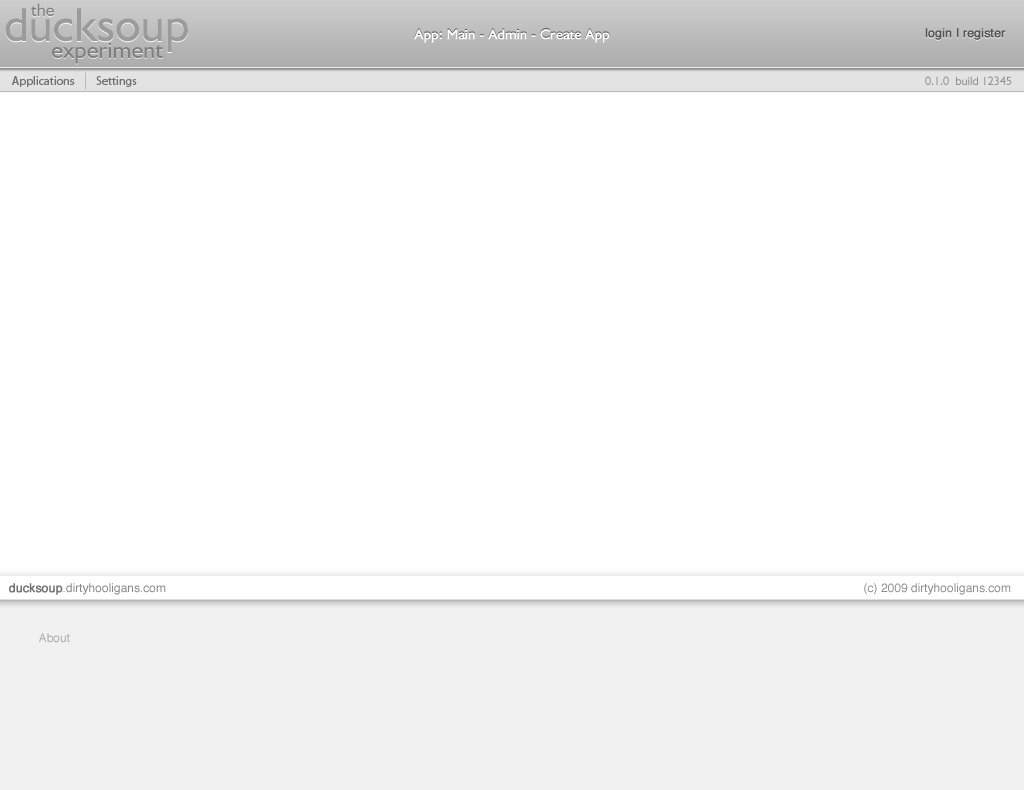
<style>
.page{position:relative;width:1024px;height:790px;background:#ffffff}
.page>*{position:absolute;margin:0}
.t1{font:18px "Humanist521BT-Roman";color:#808080}
.t2{font:48px "Humanist521BT-Roman";color:#9b9b9b}
.t3{font:48px "Humanist521BT-Roman";color:#9a9a9a}
.t4{font:14px "Humanist521BT-Roman";color:#ffffff;font-weight:bold}
.t5{font:12px "Helvetica";font-weight:bold}
.t6{font:12px "Helvetica";color:#535353;font-weight:bold}
.t7{font:24px "Humanist521BT-Roman"}
.t8{font:24px "Humanist521BT-Roman";color:#7f7f7f}
.t9{font:12px "MyriadPro-Regular";color:#717171}
.t10{font:12px "Humanist521BT-Roman";color:#919191}
.t11{font:12px "Helvetica";color:#898989}
.t12{font:12px "Helvetica";color:#727272;font-weight:bold}
.t13{font:12px "Helvetica";color:#8e8e8e}
.t14{font:12px "Helvetica";color:#aaaaaa}
</style>
<div class="page">
<p class="t1" style="left:30px;top:3px;width:24px;height:13px">the</p>
<p class="t2" style="left:5px;top:9px;width:183px;height:44px">ducksoup</p>
<p class="t3" style="left:5px;top:8px;width:183px;height:44px">ducksoup</p>
<p class="t4" style="left:414px;top:29px;width:196px;height:14px">App: Main - Admin - Create App</p>
<p class="t5" style="left:925px;top:29px;width:81px;height:12px">login | register</p>
<p class="t6" style="left:925px;top:28px;width:81px;height:12px">login | register</p>
<p class="t7" style="left:52px;top:43px;width:111px;height:22px">experiment</p>
<p class="t8" style="left:52px;top:42px;width:111px;height:22px">experiment</p>
<p class="t9" style="left:12px;top:76px;width:63px;height:11px">Applications</p>
<p class="t9" style="left:96px;top:76px;width:41px;height:11px">Settings</p>
<p class="t10" style="left:925px;top:76px;width:87px;height:9px">0.1.0  build 12345</p>
<p class="t11" style="left:9px;top:583px;width:157px;height:12px"><span class="t12">ducksoup</span>.dirtyhooligans.com</p>
<p class="t13" style="left:864px;top:583px;width:147px;height:12px">(c) 2009 dirtyhooligans.com</p>
<p class="t14" style="left:39px;top:633px;width:31px;height:10px">About</p>
</div>
